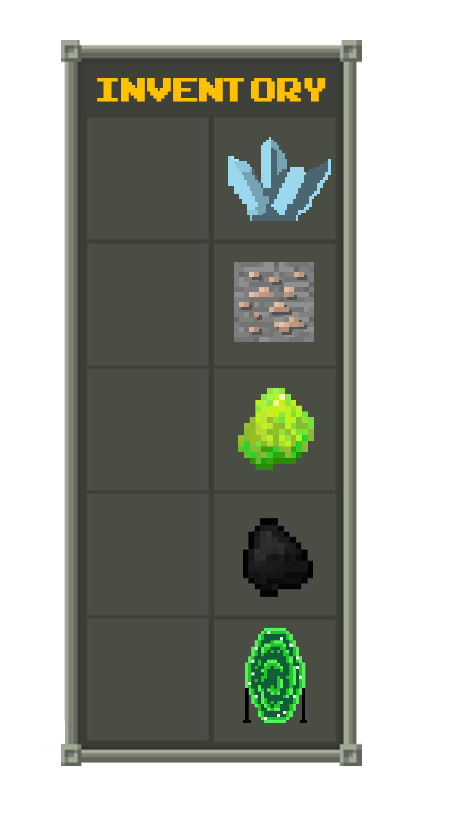
<style>
.page{position:relative;width:452px;height:834px;background:#ffffff}
.page>*{position:absolute;margin:0}
.t1{font:45px "ArcadeClassic";color:#ffc000;font-weight:bold}
</style>
<div class="page">
<p class="t1" style="left:97px;top:78px;width:229px;height:24px">inventory</p>
</div>
